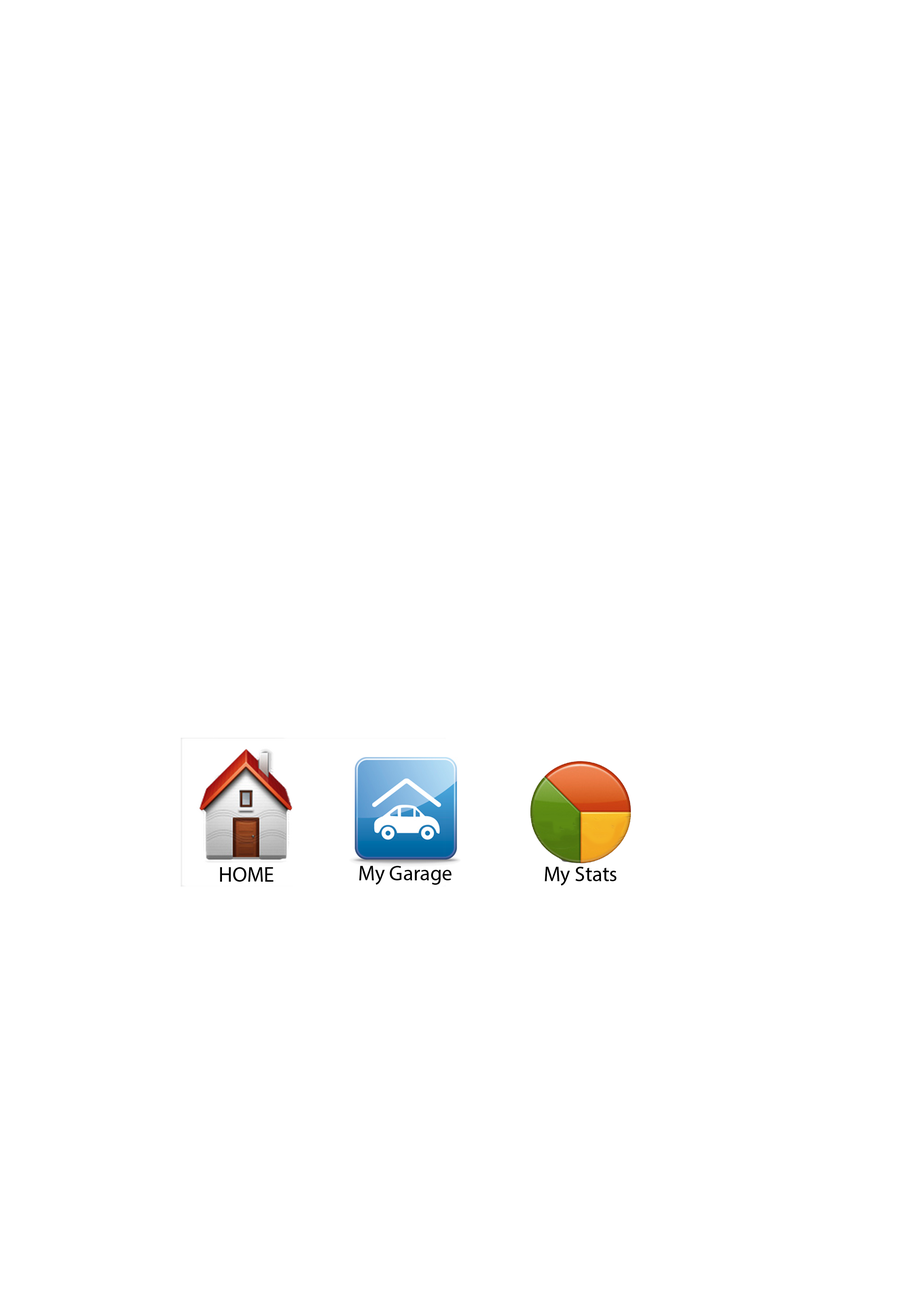
<style>
.page{position:relative;width:923px;height:1292px;background:#ffffff}
.page>*{position:absolute;margin:0}
.t1{font:21.1px "MyriadPro-Regular";color:#000000}
</style>
<div class="page">
<p class="t1" style="left:220px;top:867px;width:53px;height:14px">HOME</p>
<p class="t1" style="left:359px;top:866px;width:92px;height:19px">My Garage</p>
<p class="t1" style="left:545px;top:867px;width:71px;height:18px">My Stats</p>
</div>
